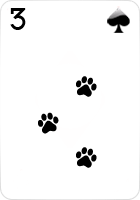
<style>
.page{position:relative;width:140px;height:200px;background:#ffffff}
.page>*{position:absolute;margin:0}
.t1{font:26px "CardCharacters";color:#000000}
</style>
<div class="page">
<p class="t1" style="left:10px;top:8px;width:16px;height:22px">3</p>
</div>
